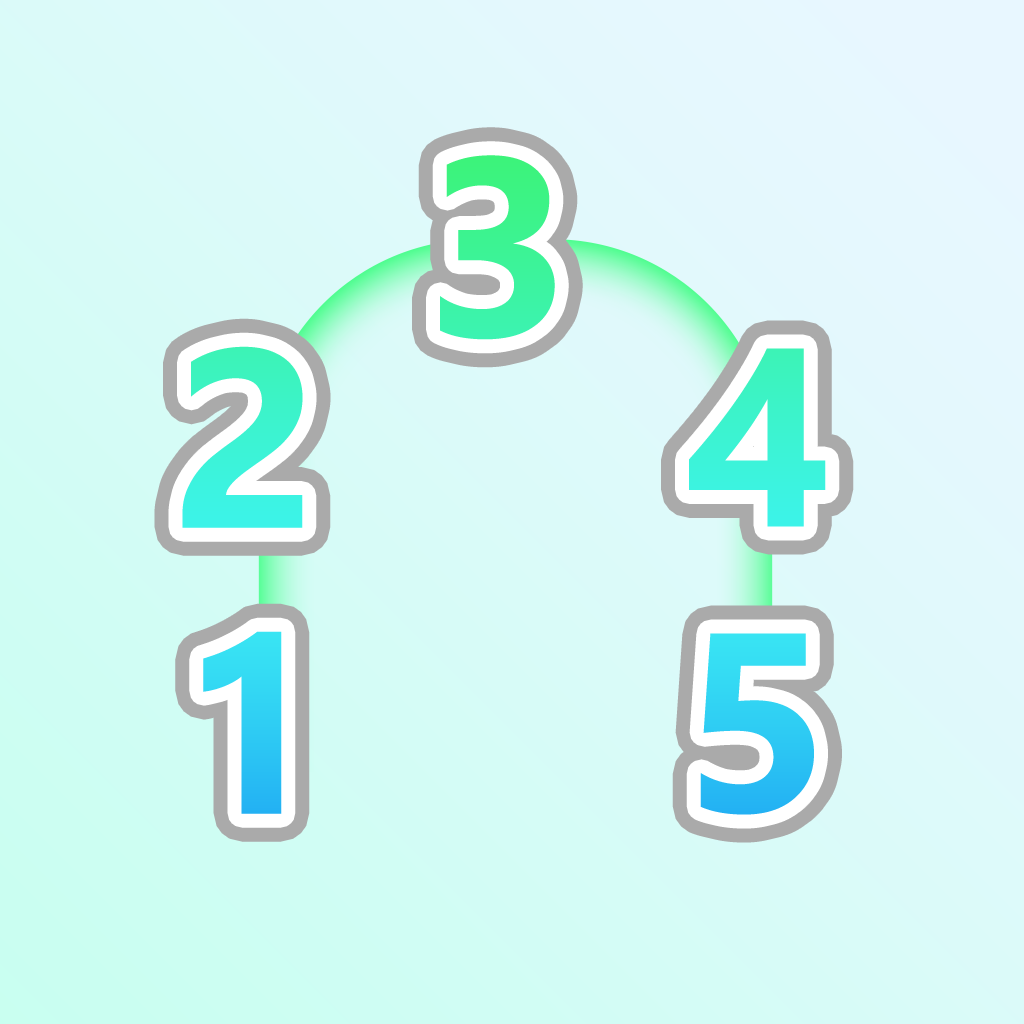
<style>
.page{position:relative;width:1024px;height:1024px}
.page>*{position:absolute;margin:0}
.t1{font:253.8px "SegoeUI-Bold";text-transform:uppercase}
.t2{font:253.8px "SegoeUI-Bold";color:#3cf3d5;text-transform:uppercase}
.t3{font:253.8px "SegoeUI-Bold";color:#3cf3d6;text-transform:uppercase}
.t4{font:253.8px "SegoeUI-Bold";color:#31d2f3;text-transform:uppercase}
.t5{font:253.8px "SegoeUI-Bold";color:#2fcef3;text-transform:uppercase}
</style>
<div class="page">
<p class="t1" style="left:440px;top:155px;width:115px;height:185px">3</p>
<p class="t2" style="left:182px;top:346px;width:121px;height:182px">2</p>
<p class="t3" style="left:689px;top:348px;width:137px;height:179px">4</p>
<p class="t4" style="left:203px;top:631px;width:79px;height:183px">1</p>
<p class="t5" style="left:700px;top:633px;width:114px;height:182px">5</p>
</div>
